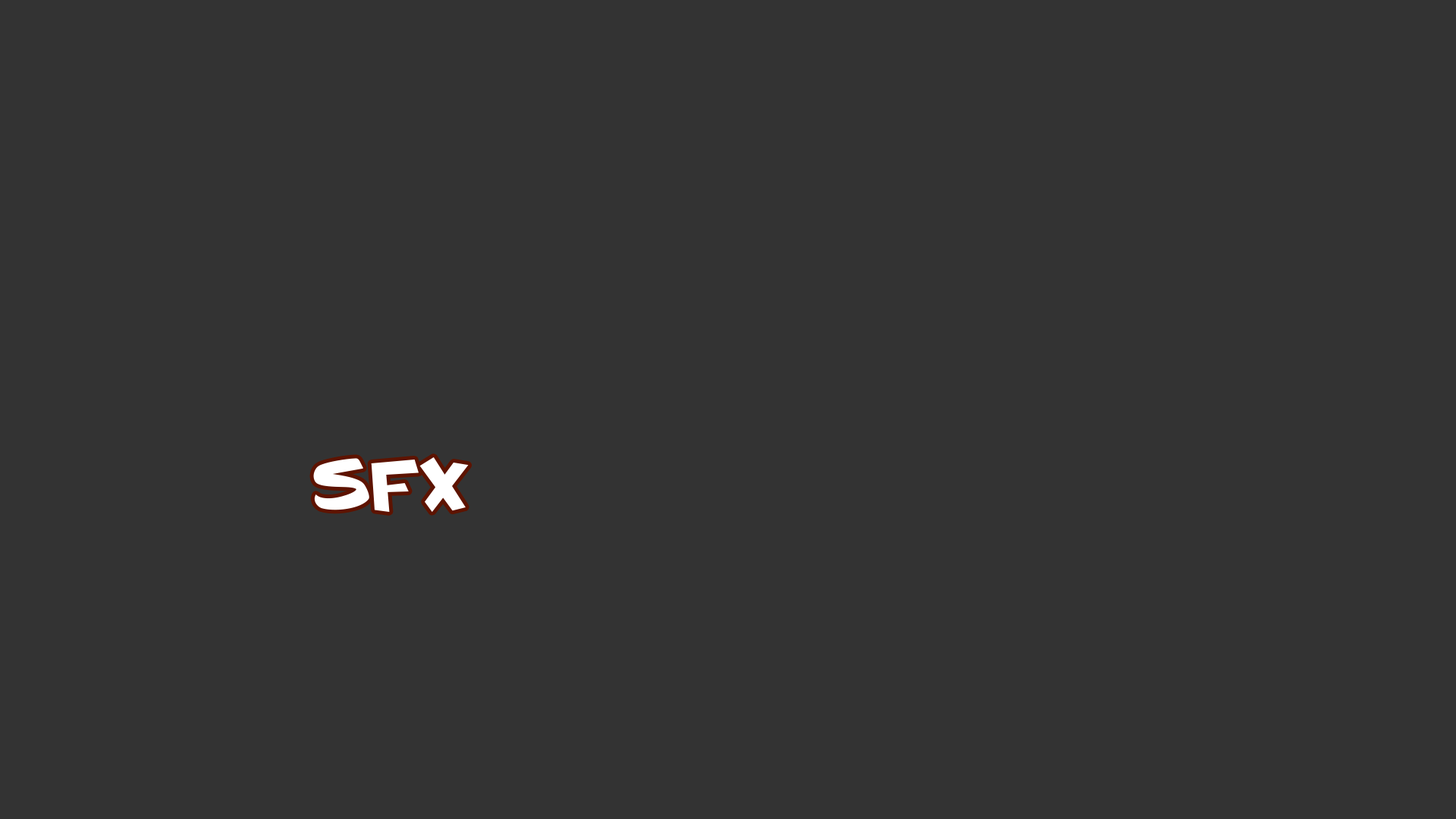
<style>
.page{position:relative;width:1456px;height:819px;background:#333333}
.page>*{position:absolute;margin:0}
.t1{font:80.9px "BLOCKHEADDUDEPersonalUse";color:#ffffff}
</style>
<div class="page">
<p class="t1" style="left:313px;top:457px;width:156px;height:55px">SFX</p>
</div>
